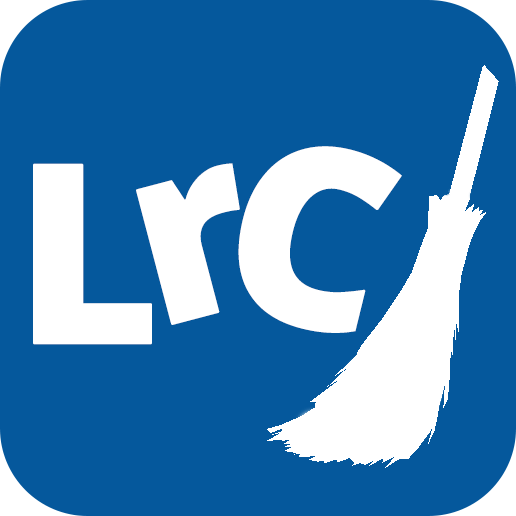
<style>
.page{position:relative;width:516px;height:516px;background:#05589c}
.page>*{position:absolute;margin:0}
.t1{font:250px "OpenSans-Extrabold";color:#ffffff;font-weight:bold}
</style>
<div class="page">
<p class="t1" style="left:238px;top:146px;width:164px;height:187px;rotate:14deg">C</p>
<p class="t1" style="left:33px;top:163px;width:119px;height:182px">L</p>
<p class="t1" style="left:136px;top:163px;width:104px;height:162px;rotate:-15deg">r</p>
</div>
